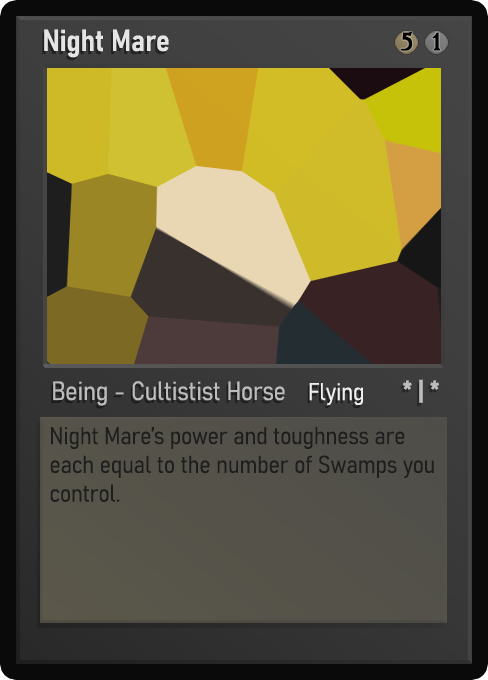
<style>
.page{position:relative;width:488px;height:680px}
.page>*{position:absolute;margin:0}
.t1{font:30px "Bahnschrift-SemiBoldSemiCondensed";color:#f2f2f2;font-weight:bold}
.t2{font:25px "WTRRoycroft";color:#000000;font-weight:bold;scale:1.09 1}
.t3{font:26px "Bahnschrift-LightSemiCondensed";color:#c8c8c8;font-weight:bold}
.t4{font:24px "Bahnschrift-LightSemiCondensed";color:#f0efef;font-weight:bold}
.t5{font:26px "Bahnschrift-BoldSemiCondensed";color:#bdbdbd;font-weight:bold}
.t6{font:24px "Bahnschrift-LightSemiCondensed";color:#1e1e1e;font-weight:bold}
</style>
<div class="page">
<p class="t1" style="left:44px;top:29px;width:125px;height:29px;opacity:0.9">Night Mare</p>
<p class="t2" style="left:400px;top:31px;width:13px;height:20px">5</p>
<p class="t2" style="left:432px;top:32px;width:9px;height:19px">1</p>
<p class="t3" style="left:53px;top:381px;width:232px;height:25px;opacity:0.9">Being - Cultistist Horse</p>
<p class="t4" style="left:309px;top:383px;width:54px;height:23px">Flying</p>
<p class="t5" style="left:403px;top:379px;width:36px;height:24px">* | *</p>
<p class="t6" style="left:50px;top:427px;width:384px;height:75px">Night Mare’s power and toughness are each equal to the number of Swamps you control.</p>
</div>
